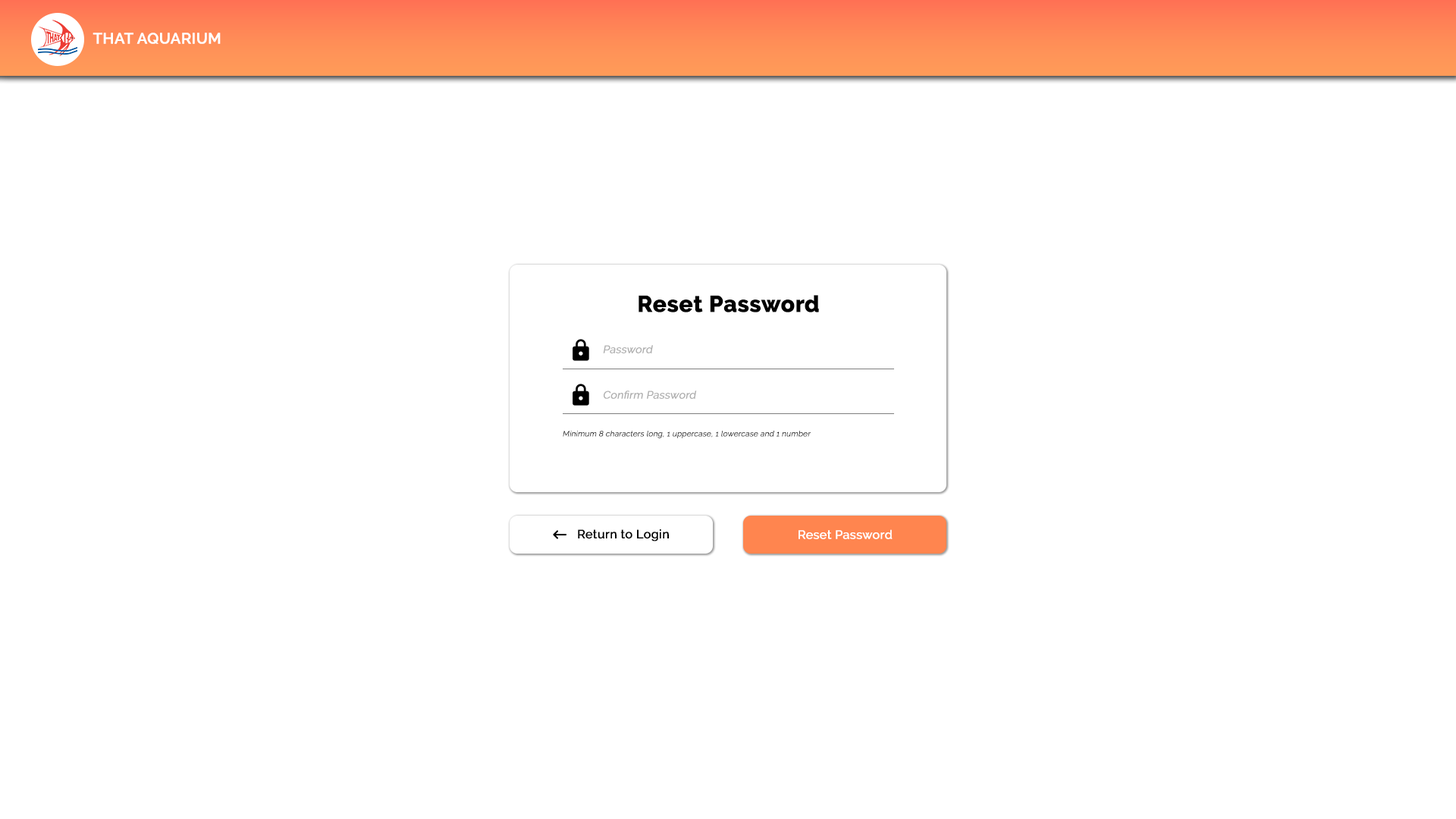
<style>
.page{position:relative;width:1456px;height:819px;background:#ffffff}
.page>*{position:absolute;margin:0}
.t1{font:15.2px "Raleway-SemiBold";color:#ffffff;font-weight:bold}
.t2{font:22.7px "Raleway-ExtraBold";color:#000000;font-weight:bold}
.t3{font:10.6px "Raleway-Regular";color:#afafaf;font-weight:bold;font-style:italic}
.t4{font:7.6px "Raleway-Light";color:#000000;font-weight:bold;font-style:italic}
.t5{font:12.1px "Raleway-Medium";color:#000000;font-weight:bold}
.t6{font:12.1px "Raleway-Medium";color:#ffffff;font-weight:bold}
</style>
<div class="page">
<p class="t1" style="left:93px;top:33px;width:128px;height:11px">THAT AQUARIUM</p>
<p class="t2" style="left:639px;top:295px;width:180px;height:17px">Reset Password</p>
<p class="t3" style="left:603px;top:345px;width:50px;height:8px">Password</p>
<p class="t3" style="left:604px;top:391px;width:93px;height:8px">Confirm Password</p>
<p class="t4" style="left:563px;top:431px;width:248px;height:7px">Minimum 8 characters long, 1 uppercase, 1 lowercase and 1 number</p>
<p class="t5" style="left:578px;top:529px;width:91px;height:12px">Return to Login</p>
<p class="t6" style="left:799px;top:529px;width:94px;height:10px">Reset Password</p>
</div>
